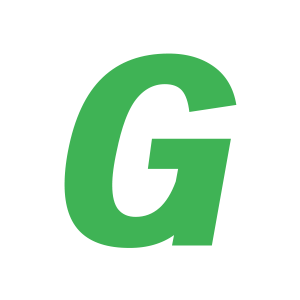
<style>
.page{position:relative;width:300px;height:300px;background:#ffffff}
.page>*{position:absolute;margin:0}
.t1{font:244.1px "zihunbiantaoti";letter-spacing:-0.06em;color:#3fb355;scale:1.39 1}
</style>
<div class="page">
<p class="t1" style="left:64px;top:53px;width:173px;height:195px">G</p>
</div>
